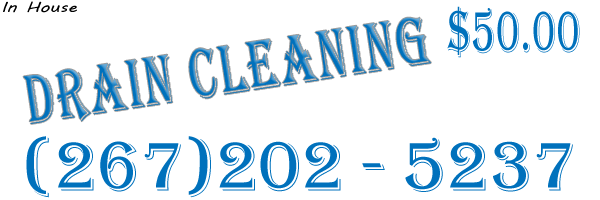
<style>
.page{position:relative;width:600px;height:200px;background:#ffffff}
.page>*{position:absolute;margin:0}
.t1{font:14px "MVBoli";color:#000000;scale:1.33 1}
.t2{font:60px "Algerian";letter-spacing:0.025em;color:#0071bc;text-transform:uppercase;scale:0.67 1}
.t3{font:72px "Algerian";letter-spacing:0.05em;color:#0071bc;text-transform:uppercase;scale:0.67 1}
.t4{font:72px "Algerian";color:#0071bc;text-transform:uppercase}
</style>
<div class="page">
<p class="t1" style="left:3px;top:1px;width:74px;height:12px">In House</p>
<p class="t2" style="left:447px;top:6px;width:133px;height:52px">$50.00</p>
<p class="t3" style="left:23px;top:17px;width:408px;height:107px;rotate:-9deg">DraiN ClEaning</p>
<p class="t4" style="left:26px;top:136px;width:547px;height:62px">(267)202 - 5237</p>
</div>
